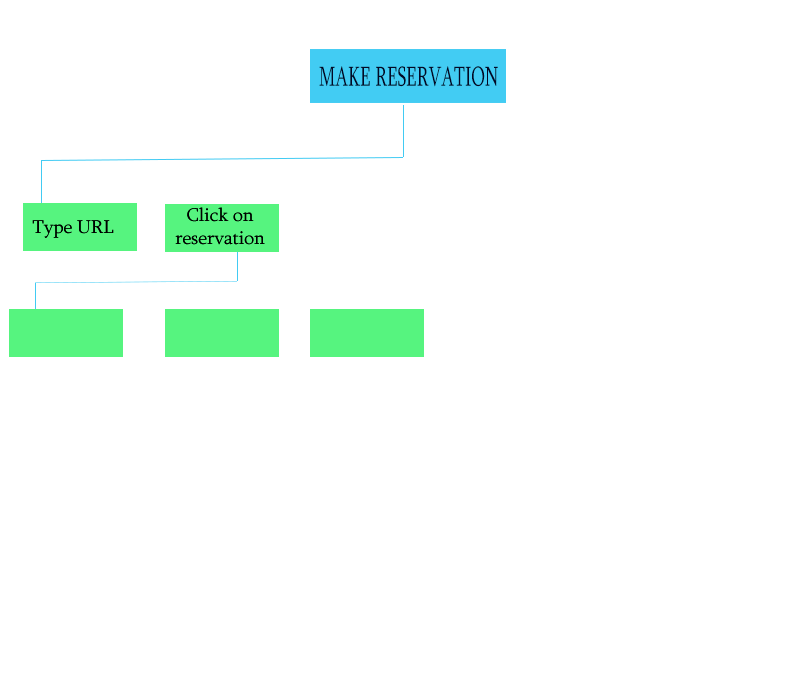
<style>
.page{position:relative;width:800px;height:700px;background:#ffffff}
.page>*{position:absolute;margin:0}
.t1{font:20.7px "Sylfaen";color:#030826;scale:0.64 1}
.t2{font:19.1px "Sylfaen";color:#000000}
</style>
<div class="page">
<p class="t1" style="left:319px;top:66px;width:179px;height:21px">MAKE RESERVATION</p>
<p class="t2" style="left:175px;top:207px;width:90px;height:38px;text-align:center">Click on<br>reservation</p>
<p class="t2" style="left:175px;top:207px;width:90px;height:38px;text-align:center">Click on<br>reservation</p>
<p class="t2" style="left:32px;top:220px;width:82px;height:18px">Type URL</p>
<p class="t2" style="left:32px;top:220px;width:82px;height:18px">Type URL</p>
</div>
